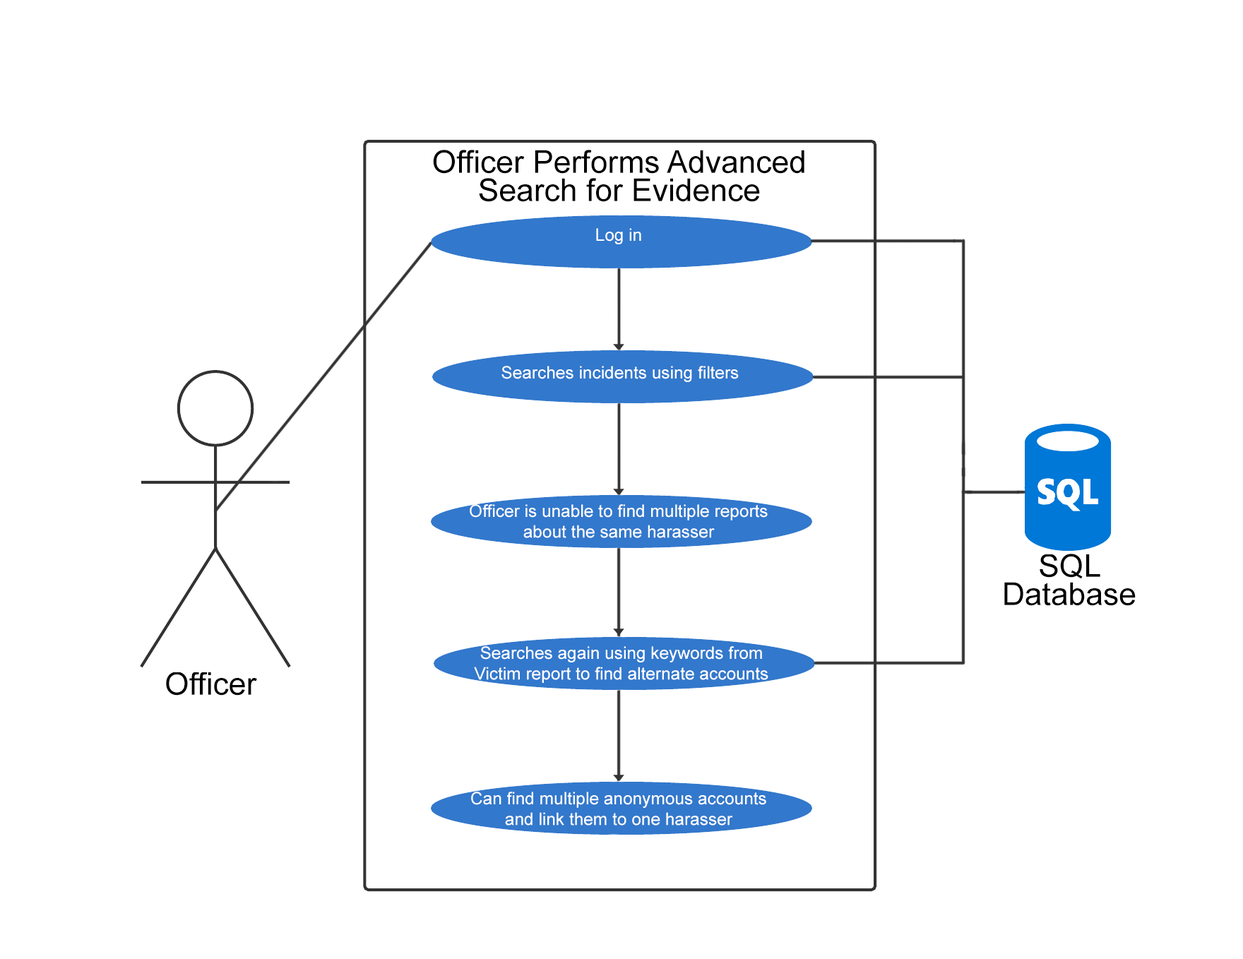
<style>
.page{position:relative;width:1243px;height:959px;background:#ffffff}
.page>*{position:absolute;margin:0}
.t1{font:31.4px/28.3px "ArialMT";color:#000000}
.t2{font:17.3px "ArialMT";color:#ffffff}
.t3{font:31.4px "ArialMT";color:#000000}
</style>
<div class="page">
<p class="t1" style="left:433px;top:150px;width:372px;height:52px;text-align:center">Officer Performs Advanced <br>Search for Evidence</p>
<p class="t2" style="left:596px;top:228px;width:45px;height:16px">Log in</p>
<p class="t2" style="left:501px;top:366px;width:238px;height:16px">Searches incidents using filters</p>
<p class="t2" style="left:470px;top:504px;width:298px;height:34px;text-align:center">Officer is unable to find multiple reports <br>about the same harasser</p>
<p class="t1" style="left:1004px;top:554px;width:132px;height:52px;text-align:center">SQL<br>Database</p>
<p class="t2" style="left:474px;top:646px;width:294px;height:37px;text-align:center">Searches again using keywords from<br>Victim report to find alternate accounts</p>
<p class="t3" style="left:166px;top:672px;width:91px;height:24px">Officer</p>
<p class="t2" style="left:471px;top:792px;width:295px;height:34px;text-align:center">Can find multiple anonymous accounts <br>and link them to one harasser</p>
</div>
